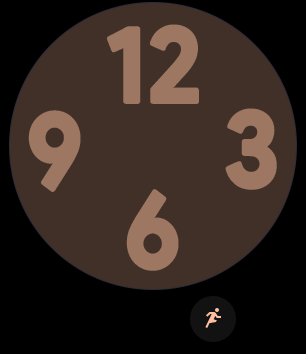
<style>
.page{position:relative;width:306px;height:354px;background:#403028}
.page>*{position:absolute;margin:0}
.t1{font:107.6px "ProductSans-Bold";letter-spacing:0.005em;color:#9e7763;scale:0.91 1}
</style>
<div class="page">
<p class="t1" style="left:108px;top:26px;width:89px;height:76px">12</p>
<p class="t1" style="left:30px;top:112px;width:49px;height:79px">9</p>
<p class="t1" style="left:227px;top:110px;width:48px;height:78px">3</p>
<p class="t1" style="left:128px;top:191px;width:49px;height:78px">6</p>
</div>
